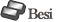
<style>
.page{position:relative;width:67px;height:22px;background:#ffffff}
.page>*{position:absolute;margin:0}
.t1{font:14px "RyuminPro-ExBold";letter-spacing:-0.08em;color:#4c4741}
</style>
<div class="page">
<p class="t1" style="left:28px;top:8px;width:25px;height:12px">Besi</p>
</div>
